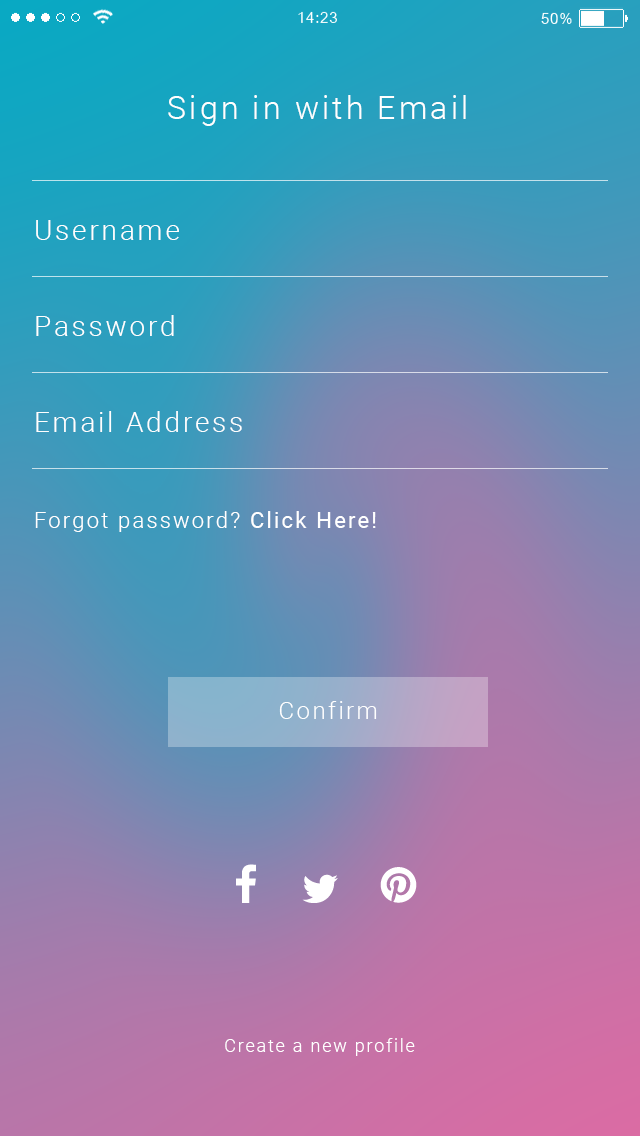
<style>
.page{position:relative;width:640px;height:1136px}
.page>*{position:absolute;margin:0}
.t1{font:32px "Roboto-Light";letter-spacing:0.1em;color:#ffffff}
.t2{font:28px/96px "Roboto-Light";letter-spacing:0.1em;color:#ffffff}
.t3{font:22px/96px "Roboto-Light";letter-spacing:0.1em;color:#ffffff}
.t4{font:22px/96px "Roboto-Regular";letter-spacing:0.1em;color:#ffffff}
.t5{font:24px "Roboto-Light";letter-spacing:0.1em;color:#ffffff}
.t6{font:18px "Roboto-Light";letter-spacing:0.1em;color:#ffffff}
</style>
<div class="page">
<p class="t1" style="left:168px;top:95px;width:298px;height:31px">Sign in with Email</p>
<p class="t2" style="left:35px;top:220px;width:341px;height:312px">Username<br>Password<br>Email Address<br><span class="t3">Forgot password? </span><span class="t4">Click Here!</span></p>
<p class="t5" style="left:279px;top:701px;width:98px;height:18px">Confirm</p>
<p class="t6" style="left:225px;top:1038px;width:190px;height:18px">Create a new profile</p>
</div>
